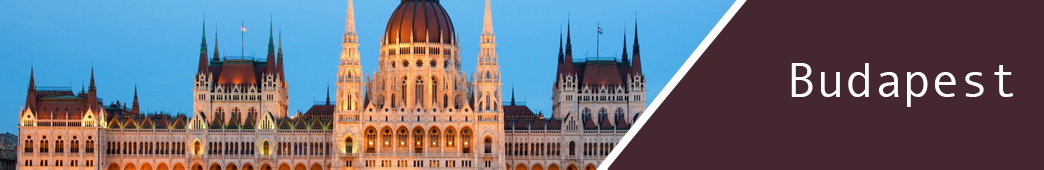
<style>
.page{position:relative;width:1044px;height:170px;background:#45272f}
.page>*{position:absolute;margin:0}
.t1{font:48px "AndaleMono";color:#ffffff}
</style>
<div class="page">
<p class="t1" style="left:791px;top:63px;width:222px;height:44px">Budapest</p>
</div>
